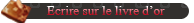
<style>
.page{position:relative;width:194px;height:23px;background:#33302e}
.page>*{position:absolute;margin:0}
.t1{font:16px "ShonarBangla"}
</style>
<div class="page">
<p class="t1" style="left:46px;top:6px;width:119px;height:9px">Ecrire sur le livre d’or</p>
</div>
